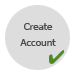
<style>
.page{position:relative;width:75px;height:75px;background:#dddddd}
.page>*{position:absolute;margin:0}
.t1{font:10px/16px "Tahoma";color:#4b4b4b}
</style>
<div class="page">
<p class="t1" style="left:20px;top:23px;width:36px;height:23px;text-align:center">Create<br>Account</p>
</div>
